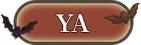
<style>
.page{position:relative;width:141px;height:45px}
.page>*{position:absolute;margin:0}
.t1{font:24px "RyuminPro-ExBold";letter-spacing:-0.08em;color:#ffffff}
</style>
<div class="page">
<p class="t1" style="left:55px;top:14px;width:35px;height:18px">YA</p>
</div>
